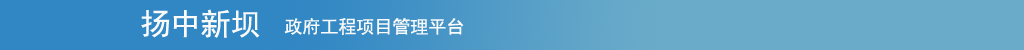
<style>
.page{position:relative;width:1024px;height:50px;background:#6aabc9}
.page>*{position:absolute;margin:0}
.t1{font:30px "SimHei";color:#fafafa}
.t2{font:18px "SimHei";color:#fafafa}
</style>
<div class="page">
<p class="t1" style="left:141px;top:9px;width:119px;height:29px">扬中新坝</p>
<p class="t2" style="left:284px;top:18px;width:180px;height:17px">政府工程项目管理平台</p>
</div>
